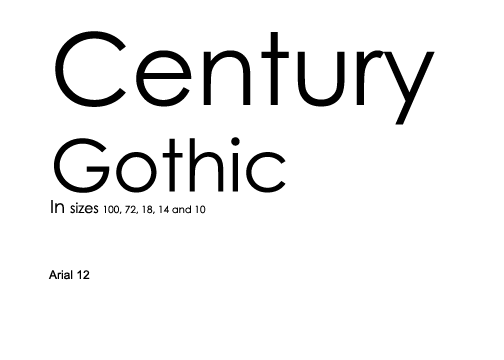
<style>
.page{position:relative;width:504px;height:360px;background:#ffffff}
.page>*{position:absolute;margin:0}
.t1{font:10px "CenturyGothic";color:#000000}
.t2{font:100px "CenturyGothic";color:#000000}
.t3{font:72px "CenturyGothic";color:#000000}
.t4{font:18px "CenturyGothic";color:#000000}
.t5{font:14px "CenturyGothic";color:#000000}
.t6{font:12px "ArialMT";color:#000000}
</style>
<div class="page">
<p class="t1" style="left:51px;top:31px;width:384px;height:183px"><span class="t2">Century<br></span><span class="t3">Gothic<br></span><span class="t4">In </span><span class="t5">sizes </span>100, 72, 18, 14 and 10</p>
<p class="t6" style="left:48px;top:270px;width:42px;height:10px">Arial 12</p>
</div>
